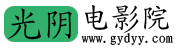
<style>
.page{position:relative;width:178px;height:49px;background:#ffffff}
.page>*{position:absolute;margin:0}
.t1{font:36px "KaiTi_GB2312";color:#000000}
.t2{font:14px "KaiTi_GB2312";color:#000000}
</style>
<div class="page">
<p class="t1" style="left:8px;top:8px;width:64px;height:32px">光阴</p>
<p class="t2" style="left:81px;top:33px;width:92px;height:12px">www.gydyy.com</p>
</div>
